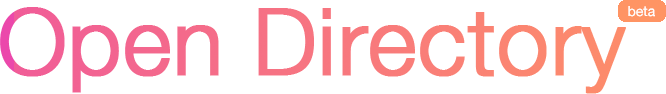
<style>
.page{position:relative;width:666px;height:94px;background:#ffffff}
.page>*{position:absolute;margin:0}
.t1{font:14px "HelveticaNeue";color:#ffffff}
.t2{font:91.7px "HelveticaNeue-Light";color:#ff6385;font-weight:bold}
.t3{font:91.7px "HelveticaNeue-Light";color:#eb48ab;font-weight:bold}
</style>
<div class="page">
<p class="t1" style="left:628px;top:6px;width:27px;height:11px;opacity:0.85">beta</p>
<p class="t1" style="left:628px;top:6px;width:27px;height:11px;opacity:0.85">beta</p>
<p class="t2" style="left:0px;top:7px;width:626px;height:87px"><span class="t3">Open </span>Directory</p>
</div>
